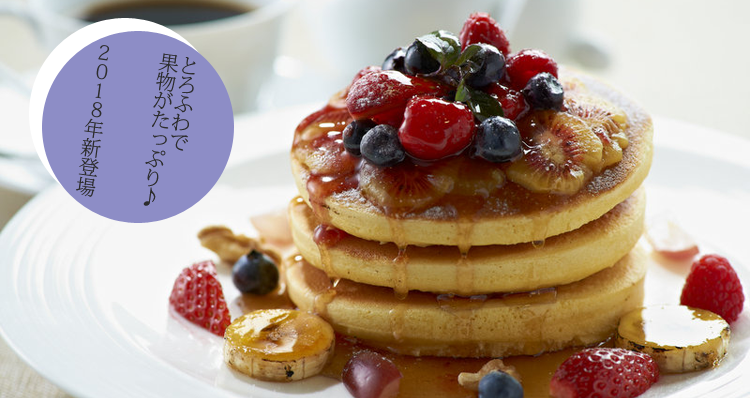
<style>
.page{position:relative;width:750px;height:398px}
.page>*{position:absolute;margin:0}
.t1{font:20px "KozMinPro-ExtraLight";letter-spacing:-0.03em;color:#2d2d2d}
.t2{font:20px/19.1px "KozMinPro-ExtraLight";letter-spacing:-0.03em;color:#2d2d2d}
.t3{font:20px/21px "KozMinPro-ExtraLight";letter-spacing:-0.03em;color:#2d2d2d}
</style>
<div class="page">
<p class="t1" style="left:76px;top:45px;width:34px;height:152px;rotate:8deg">2018年新登場</p>
<p class="t2" style="left:143px;top:53px;width:53px;height:153px;rotate:8deg"><span class="t3">とろふわで<br></span>果物がたっぷり♪</p>
</div>
